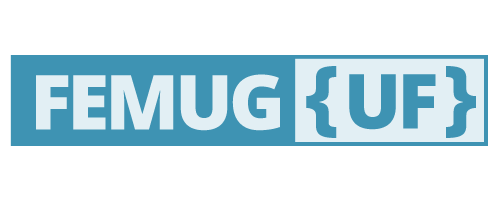
<style>
.page{position:relative;width:500px;height:200px;background:#ffffff}
.page>*{position:absolute;margin:0}
.t1{font:76.1px "OpenSans-Extrabold";letter-spacing:-0.05em;color:#e2eff4}
.t2{font:80.7px "OpenSans-Extrabold";color:#3e93b3}
.t3{font:76.1px "OpenSans-Extrabold";letter-spacing:-0.05em;color:#3e93b3}
</style>
<div class="page">
<p class="t1" style="left:36px;top:74px;width:244px;height:57px">FEMUG</p>
<p class="t2" style="left:306px;top:66px;width:170px;height:72px">{     }</p>
<p class="t3" style="left:349px;top:74px;width:87px;height:56px">UF</p>
</div>
